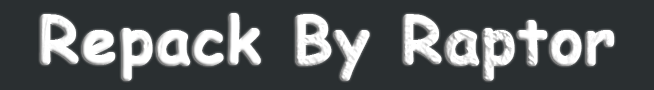
<style>
.page{position:relative;width:654px;height:90px;background:#2a2f31}
.page>*{position:absolute;margin:0}
.t1{font:64px "ComicSansMS-Bold";color:#ffffff;font-weight:bold}
</style>
<div class="page">
<p class="t1" style="left:39px;top:13px;width:576px;height:68px">Repack By Raptor</p>
</div>
